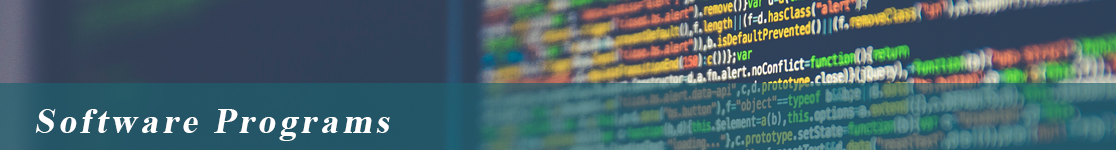
<style>
.page{position:relative;width:1116px;height:150px}
.page>*{position:absolute;margin:0}
.t1{font:36px "TimesNewRomanPS-BoldMT";letter-spacing:0.1em;color:#ffffff;font-style:italic}
</style>
<div class="page">
<p class="t1" style="left:35px;top:109px;width:355px;height:32px">Software Programs</p>
</div>
